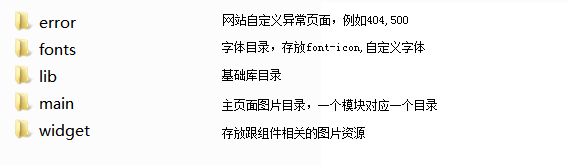
<style>
.page{position:relative;width:569px;height:165px;background:#fcfcfc}
.page>*{position:absolute;margin:0}
.t1{font:12px "SimSun";color:#000000}
</style>
<div class="page">
<p class="t1" style="left:223px;top:14px;width:185px;height:12px">网站自定义异常页面，例如404,500</p>
<p class="t1" style="left:222px;top:41px;width:203px;height:12px">字体目录，存放font-icon,自定义字体</p>
<p class="t1" style="left:222px;top:69px;width:59px;height:12px">基础库目录</p>
<p class="t1" style="left:222px;top:99px;width:215px;height:12px">主页面图片目录，一个模块对应一个目录</p>
<p class="t1" style="left:222px;top:127px;width:143px;height:12px">存放跟组件相关的图片资源</p>
</div>
